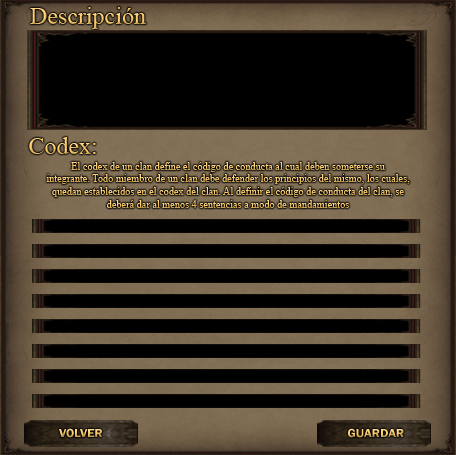
<style>
.page{position:relative;width:456px;height:455px;background:#000000}
.page>*{position:absolute;margin:0}
.t1{font:24px "TimesNewRomanPSMT"}
.t2{font:10.7px "TimesNewRomanPSMT";scale:0.96 1}
.t3{font:12px "FranklinGothic-Demi";scale:1.07 1}
</style>
<div class="page">
<p class="t1" style="left:30px;top:7px;width:116px;height:22px">Descripción</p>
<p class="t1" style="left:29px;top:137px;width:67px;height:17px">Codex:</p>
<p class="t2" style="left:46px;top:162px;width:364px;height:46px;text-align:center">El codex de un clan define el código de conducta al cual deben someterse su<br>integrante. Todo miembro de un clan debe defender los principios del mismo, los cuales,<br>quedan establecidos en el codex del clan. Al definir el código de conducta del clan, se<br>deberá dar al menos 4 sentencias a modo de mandamientos</p>
<p class="t3" style="left:59px;top:428px;width:43px;height:10px">VOLVER</p>
<p class="t3" style="left:348px;top:428px;width:56px;height:10px">GUARDAR</p>
</div>
